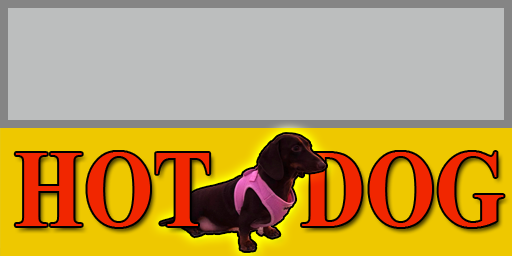
<style>
.page{position:relative;width:512px;height:256px;background:#bcbebe}
.page>*{position:absolute;margin:0}
.t1{font:110.2px "TimesNewRomanPS-BoldMT";color:#f12600;scale:0.81 1}
</style>
<div class="page">
<p class="t1" style="left:15px;top:152px;width:195px;height:75px">HOT</p>
<p class="t1" style="left:302px;top:152px;width:202px;height:75px">DOG</p>
</div>
